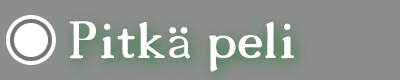
<style>
.page{position:relative;width:400px;height:80px;background:#8d8d8d}
.page>*{position:absolute;margin:0}
.t1{font:72px "18thCentury";color:#ffffff}
</style>
<div class="page">
<p class="t1" style="left:69px;top:21px;width:225px;height:51px">Pitkä peli</p>
</div>
